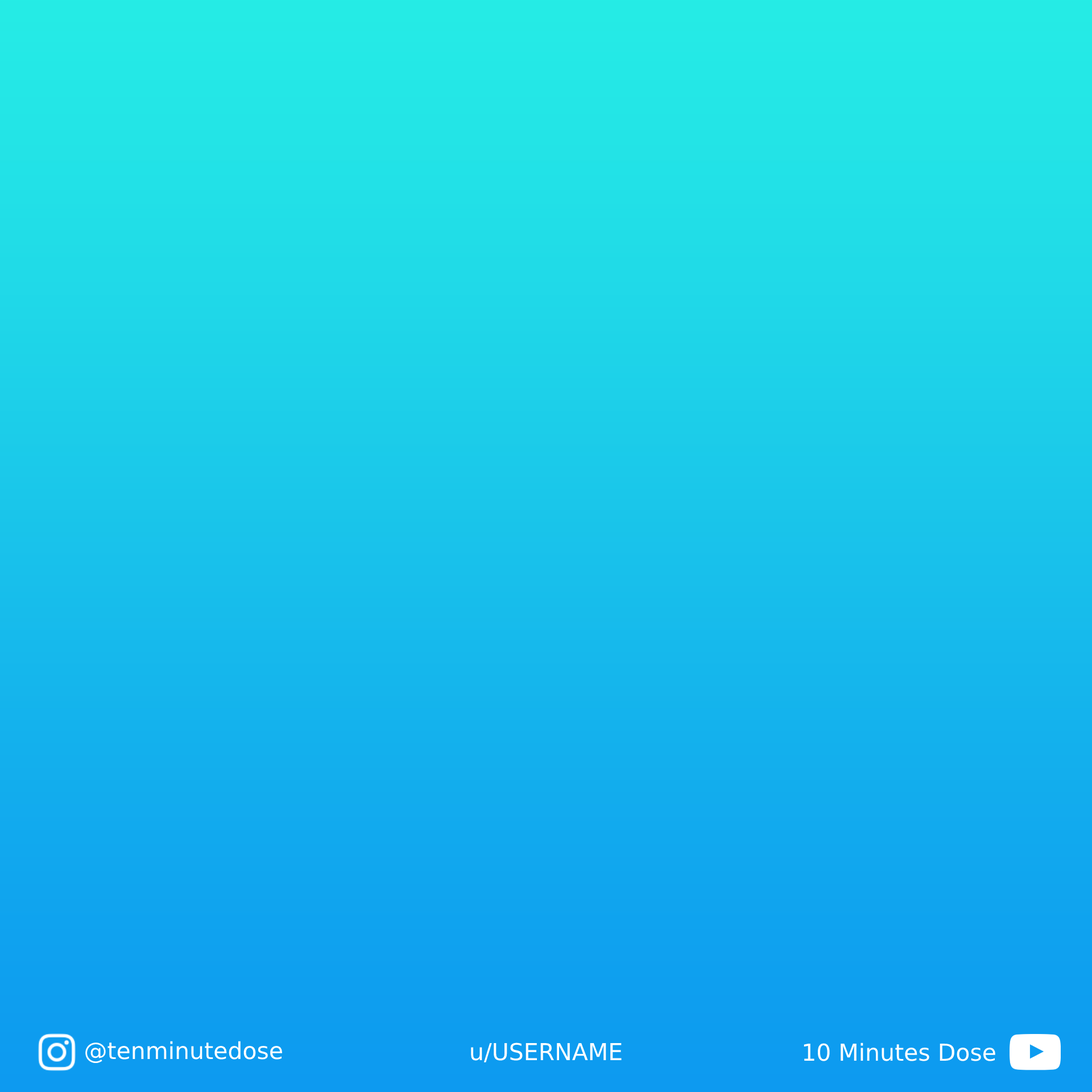
<style>
.page{position:relative;width:1092px;height:1092px}
.page>*{position:absolute;margin:0}
.t1{font:23.3px "DejaVuSans";color:#ffffff}
</style>
<div class="page">
<p class="t1" style="left:85px;top:1041px;width:197px;height:22px">@tenminutedose</p>
<p class="t1" style="left:471px;top:1043px;width:151px;height:19px">u/USERNAME</p>
<p class="t1" style="left:804px;top:1043px;width:191px;height:18px">10 Minutes Dose</p>
</div>
